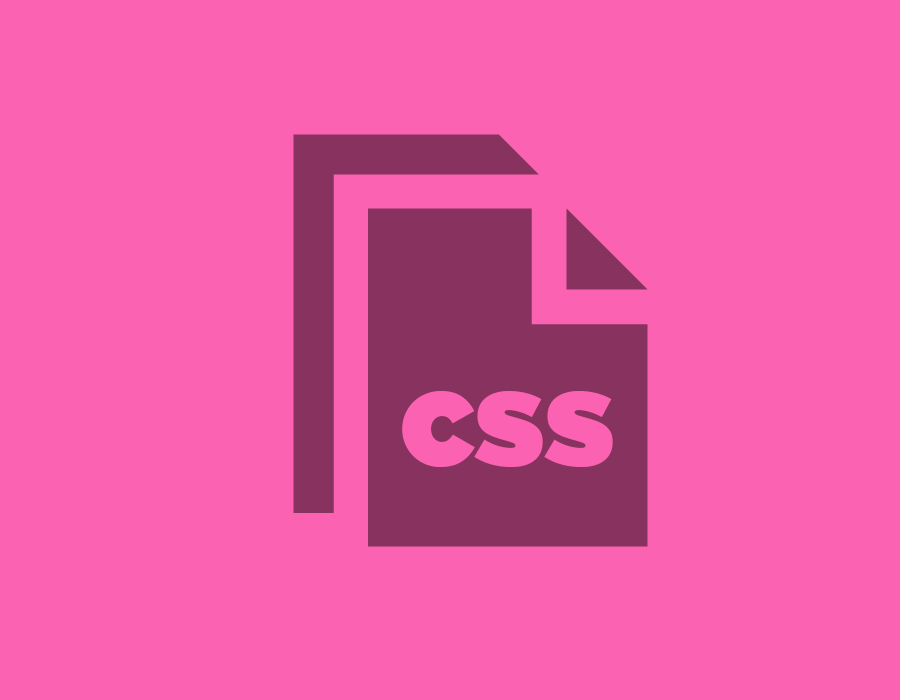
<style>
.page{position:relative;width:900px;height:700px;background:#fc62b2}
.page>*{position:absolute;margin:0}
.t1{font:131.7px "GothamUltra";color:#fc62b2}
</style>
<div class="page">
<p class="t1" style="left:402px;top:391px;width:211px;height:76px">css</p>
</div>
